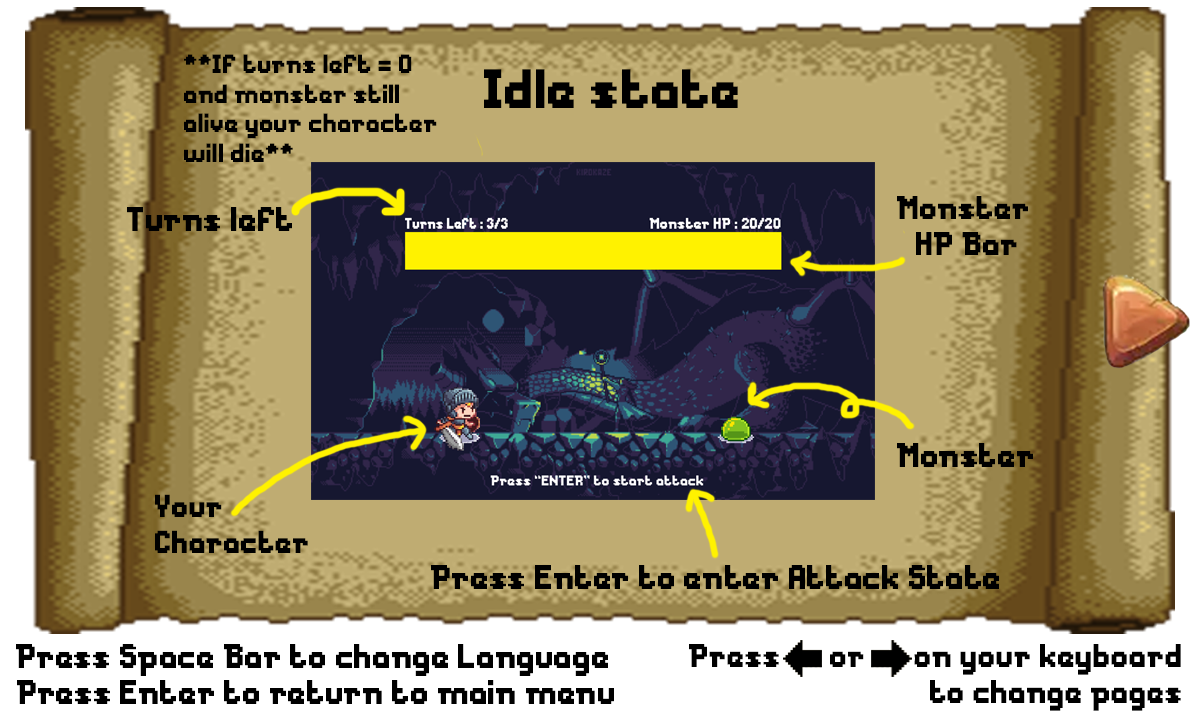
<style>
.page{position:relative;width:1200px;height:720px}
.page>*{position:absolute;margin:0}
.t1{font:24.6px "Messe-Duesseldorf";color:#000000}
.t2{font:51.6px "Messe-Duesseldorf";color:#000000}
.t3{font:30.5px "Messe-Duesseldorf";color:#000000}
.t4{font:32px "Messe-Duesseldorf";color:#000000}
.t5{font:29.7px "Messe-Duesseldorf";color:#000000}
</style>
<div class="page">
<p class="t1" style="left:184px;top:54px;width:253px;height:108px">**If turns left = 0 <br>and monster still <br>alive your character <br>will die**</p>
<p class="t2" style="left:484px;top:69px;width:254px;height:39px">Idle state</p>
<p class="t3" style="left:897px;top:196px;width:131px;height:59px;text-align:center">Monster <br>HP Bar</p>
<p class="t4" style="left:127px;top:207px;width:165px;height:24px">Turns left</p>
<p class="t4" style="left:897px;top:443px;width:136px;height:24px">Monster</p>
<p class="t5" style="left:155px;top:494px;width:153px;height:59px">Your <br>Character</p>
<p class="t4" style="left:431px;top:565px;width:568px;height:24px">Press Enter to enter Attack State</p>
<p class="t4" style="left:16px;top:644px;width:592px;height:32px">Press Space Bar to change Language</p>
<p class="t3" style="left:689px;top:644px;width:492px;height:67px;text-align:right">Press &lt;- or -&gt; on your keyboard <br>to change pages</p>
<p class="t4" style="left:17px;top:680px;width:597px;height:24px">Press Enter to return to main menu</p>
</div>
